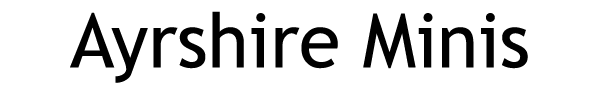
<style>
.page{position:relative;width:600px;height:100px;background:#ffffff}
.page>*{position:absolute;margin:0}
.t1{font:75px "TrebuchetMS";color:#000000}
</style>
<div class="page">
<p class="t1" style="left:70px;top:11px;width:458px;height:72px">Ayrshire Minis</p>
</div>
